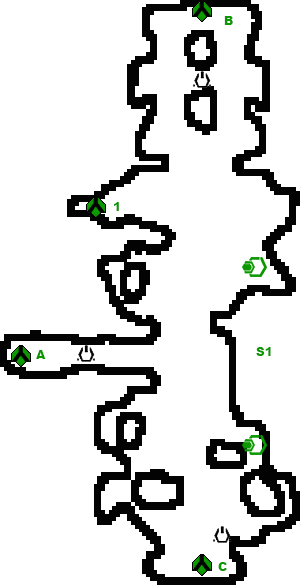
<style>
.page{position:relative;width:300px;height:585px;background:#ffffff}
.page>*{position:absolute;margin:0}
.t1{font:12px "Arial-Black";color:#0c9801}
</style>
<div class="page">
<p class="t1" style="left:224px;top:16px;width:9px;height:9px">B</p>
<p class="t1" style="left:114px;top:202px;width:5px;height:9px">1</p>
<p class="t1" style="left:36px;top:350px;width:10px;height:9px">A</p>
<p class="t1" style="left:256px;top:347px;width:15px;height:9px">S1</p>
<p class="t1" style="left:218px;top:562px;width:9px;height:9px">C</p>
</div>
